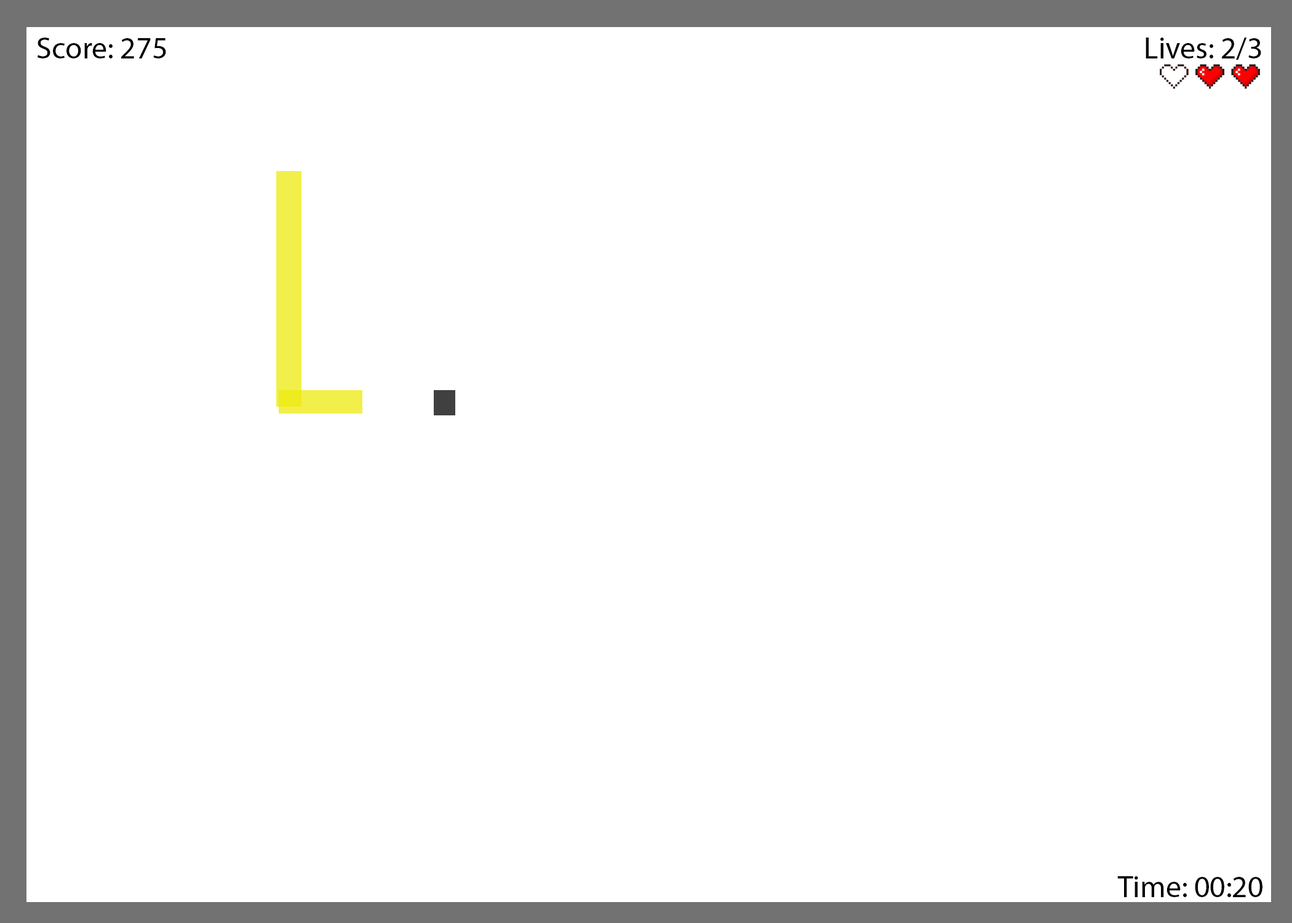
<style>
.page{position:relative;width:1292px;height:923px;background:#ffffff}
.page>*{position:absolute;margin:0}
.t1{font:30.8px "MyriadPro-Regular";color:#000000}
</style>
<div class="page">
<p class="t1" style="left:37px;top:38px;width:129px;height:20px">Score: 275</p>
<p class="t1" style="left:1146px;top:38px;width:115px;height:22px">Lives: 2/3</p>
<p class="t1" style="left:1117px;top:876px;width:146px;height:21px">Time: 00:20</p>
</div>
